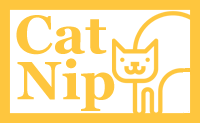
<style>
.page{position:relative;width:200px;height:123px;background:#ffffff}
.page>*{position:absolute;margin:0}
.t1{font:53.8px "Georgia-Bold";color:#fec63e}
</style>
<div class="page">
<p class="t1" style="left:16px;top:15px;width:91px;height:40px">Cat</p>
<p class="t1" style="left:17px;top:58px;width:98px;height:53px">Nip</p>
</div>
